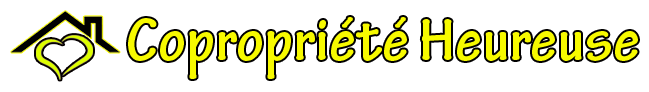
<style>
.page{position:relative;width:649px;height:92px;background:#ffffff}
.page>*{position:absolute;margin:0}
.t1{font:64px "TektonPro-BoldCond";color:#f7fa00;scale:1.13 1}
</style>
<div class="page">
<p class="t1" style="left:128px;top:17px;width:510px;height:62px">Copropriété Heureuse</p>
</div>
